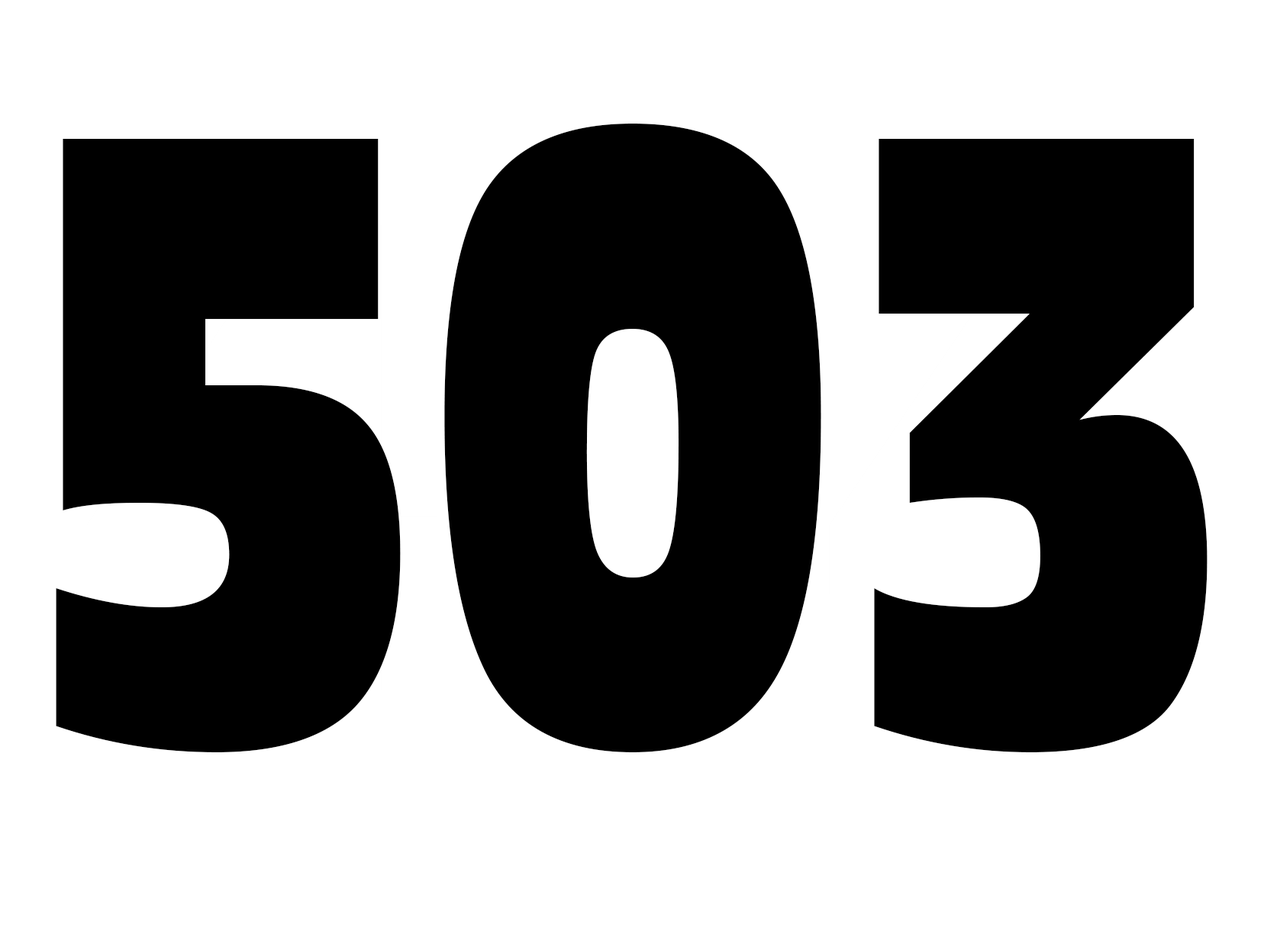
<style>
.page{position:relative;width:1264px;height:943px;background:#ffffff}
.page>*{position:absolute;margin:0}
.t1{font:841.6px "AntiqueOlive-Compact";color:#000000;scale:0.68 1}
</style>
<div class="page">
<p class="t1" style="left:56px;top:124px;width:1151px;height:629px">503</p>
</div>
